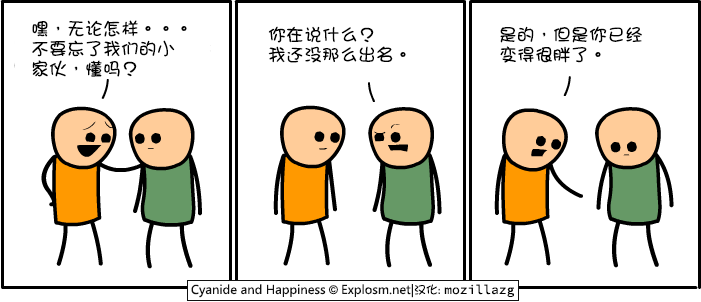
<style>
.page{position:relative;width:701px;height:302px;background:#ffffff}
.page>*{position:absolute;margin:0}
.t1{font:18px/20px "DFGirl";color:#000000}
</style>
<div class="page">
<p class="t1" style="left:32px;top:20px;width:155px;height:57px">嘿，无论怎样。。。<br>不要忘了我们的小<br>家伙，懂吗？</p>
<p class="t1" style="left:268px;top:26px;width:138px;height:37px">你在说什么？<br>我还没那么出名。</p>
<p class="t1" style="left:500px;top:26px;width:142px;height:37px">是的，但是你已经<br>变得很胖了。</p>
</div>
